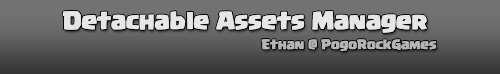
<style>
.page{position:relative;width:500px;height:74px}
.page>*{position:absolute;margin:0}
.t1{font:18px "CCBackBeat";color:#e6e6e6}
.t2{font:10px "CCBackBeat";color:#b5b5b5}
</style>
<div class="page">
<p class="t1" style="left:62px;top:11px;width:365px;height:22px">Detachable Assets Manager</p>
<p class="t2" style="left:261px;top:39px;width:176px;height:13px">Ethan @ PogoRockGames</p>
</div>
